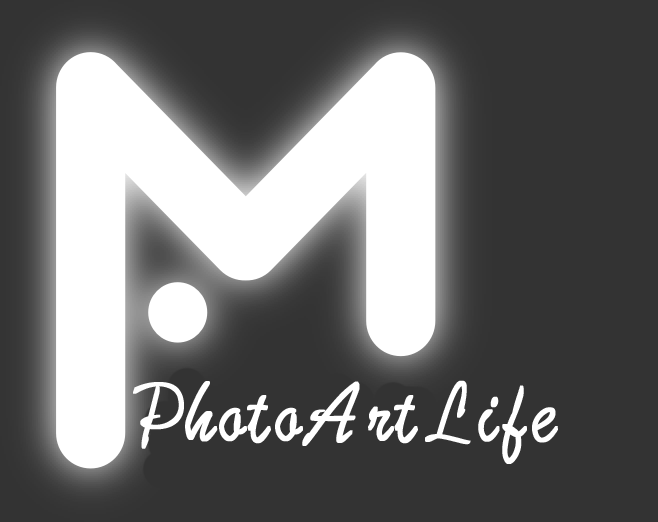
<style>
.page{position:relative;width:658px;height:522px;background:#333333}
.page>*{position:absolute;margin:0}
.t1{font:91.2px "STXingkaiTC-Light";color:#ffffff;font-weight:bold;scale:0.88 1}
</style>
<div class="page">
<p class="t1" style="left:133px;top:380px;width:425px;height:84px">PhotoArtLife</p>
</div>
